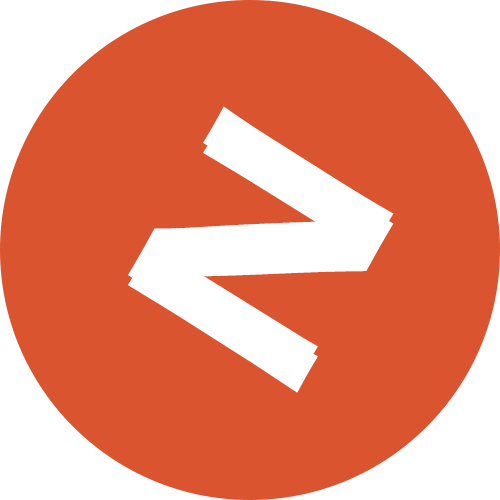
<style>
.page{position:relative;width:500px;height:500px;background:#da552f}
.page>*{position:absolute;margin:0}
.t1{font:300px "ErasITC-Demi";color:#ffffff}
</style>
<div class="page">
<p class="t1" style="left:128px;top:106px;width:266px;height:277px;rotate:120deg">N</p>
<p class="t1" style="left:128px;top:116px;width:266px;height:277px;rotate:120deg">N</p>
</div>
